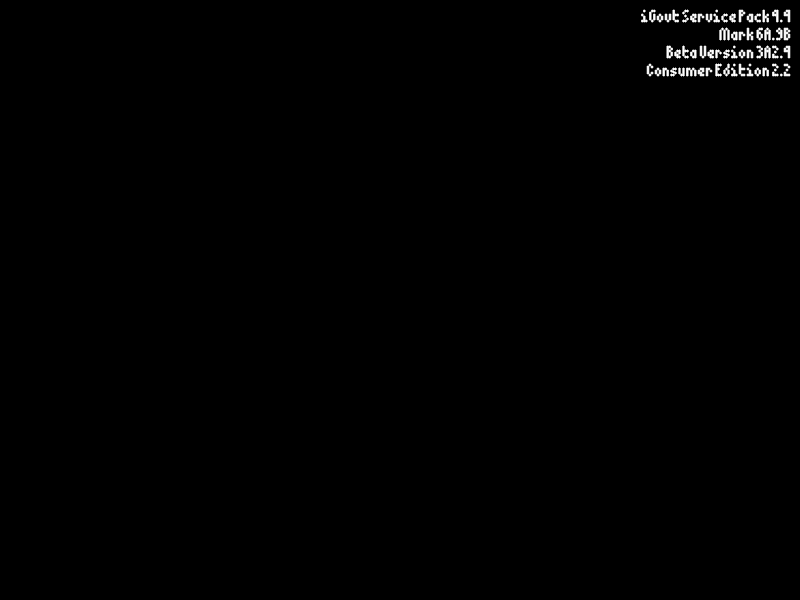
<style>
.page{position:relative;width:800px;height:600px;background:#000000}
.page>*{position:absolute;margin:0}
.t1{font:16px/18px "5Dotmatrix-1979";letter-spacing:-0.01em;color:#ffffff}
</style>
<div class="page">
<p class="t1" style="left:641px;top:9px;width:150px;height:68px;text-align:right">iGovt Service Pack 4.4<br>Mark 6A.9B<br> Beta Version 3A2.4<br>Consumer Edition 2.2</p>
</div>
